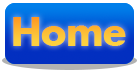
<style>
.page{position:relative;width:140px;height:70px}
.page>*{position:absolute;margin:0}
.t1{font:37.5px "Futura-Bold";color:#fdc037}
</style>
<div class="page">
<p class="t1" style="left:13px;top:17px;width:113px;height:29px">Home</p>
</div>
